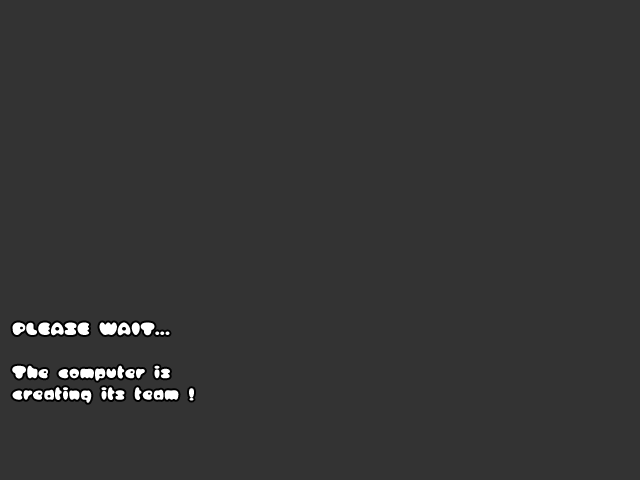
<style>
.page{position:relative;width:640px;height:480px;background:#333333}
.page>*{position:absolute;margin:0}
.t1{font:18px "ICHIGORegular";color:#ffffff}
</style>
<div class="page">
<p class="t1" style="left:12px;top:322px;width:182px;height:81px">PLEASE WAIT...<br><br>The computer is<br>creating its team !</p>
</div>
